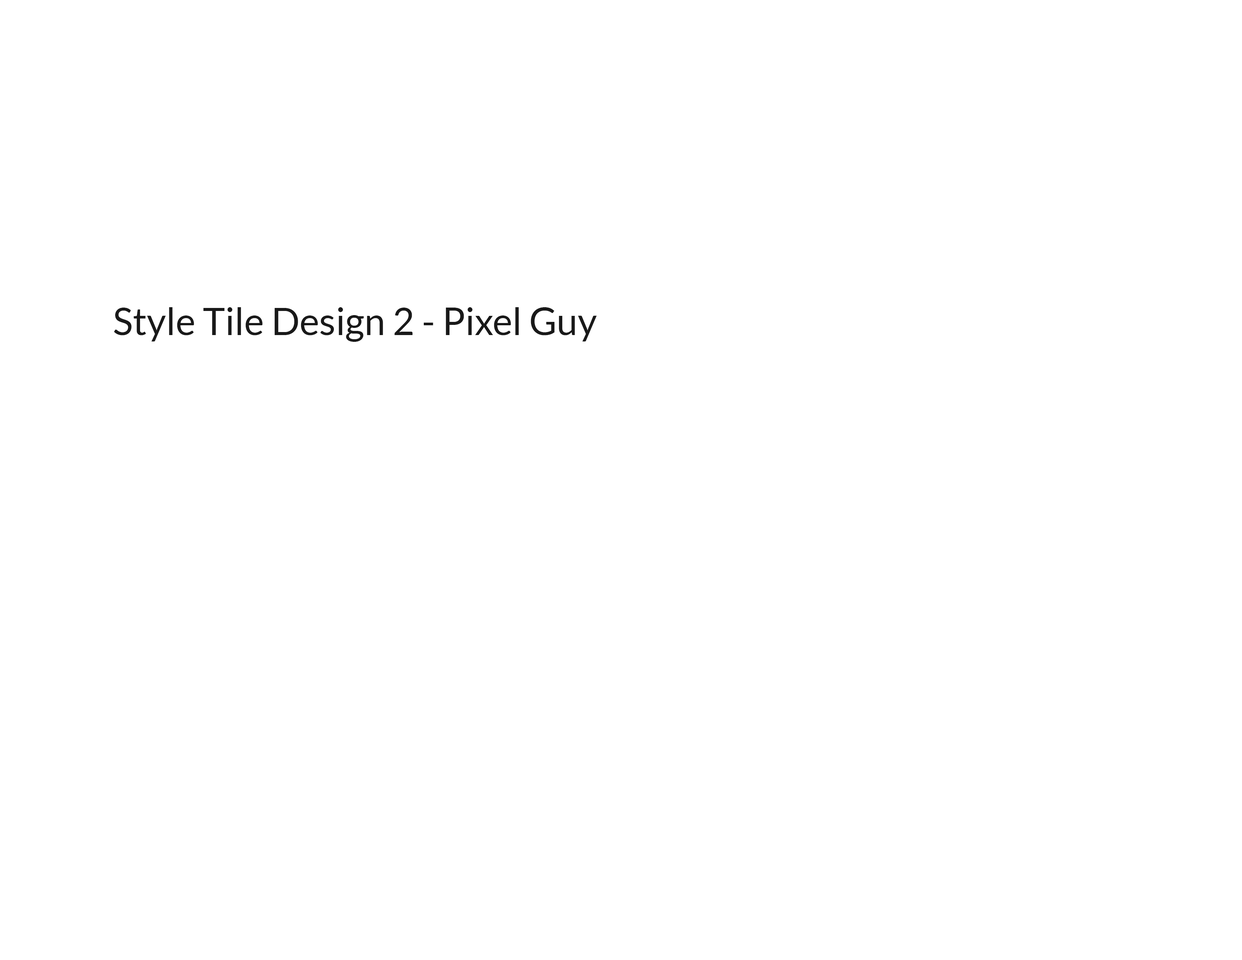
<style>
.page{position:relative;width:1242px;height:960px;background:#ffffff}
.page>*{position:absolute;margin:0}
.t1{font:37.6px "Lato-Regular";color:#191919}
</style>
<div class="page">
<p class="t1" style="left:114px;top:307px;width:483px;height:35px">Style Tile Design 2 - Pixel Guy</p>
</div>
